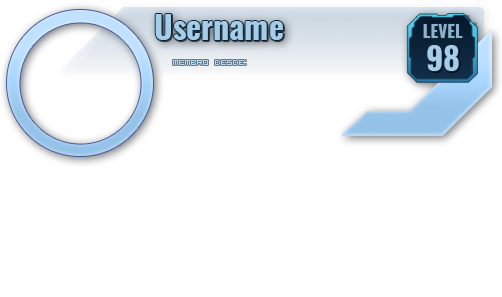
<style>
.page{position:relative;width:502px;height:297px;background:#ffffff}
.page>*{position:absolute;margin:0}
.t1{font:32px "Oswald-Bold";color:#a4cde9}
.t2{font:17.3px "Oswald-Bold";color:#8db2cc}
.t3{font:10px "VisitorTT1BRK";color:#9ecbf1}
</style>
<div class="page">
<p class="t1" style="left:155px;top:14px;width:128px;height:26px">Username</p>
<p class="t2" style="left:423px;top:24px;width:40px;height:14px">LEVEL</p>
<p class="t1" style="left:427px;top:45px;width:32px;height:26px">98</p>
<p class="t3" style="left:173px;top:60px;width:73px;height:5px">membro desde:</p>
</div>
